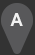
<style>
.page{position:relative;width:35px;height:55px;background:#58585a}
.page>*{position:absolute;margin:0}
.t1{font:18px "Arial-BoldMT";color:#f1f1f1}
</style>
<div class="page">
<p class="t1" style="left:10px;top:13px;width:13px;height:13px">A</p>
</div>
